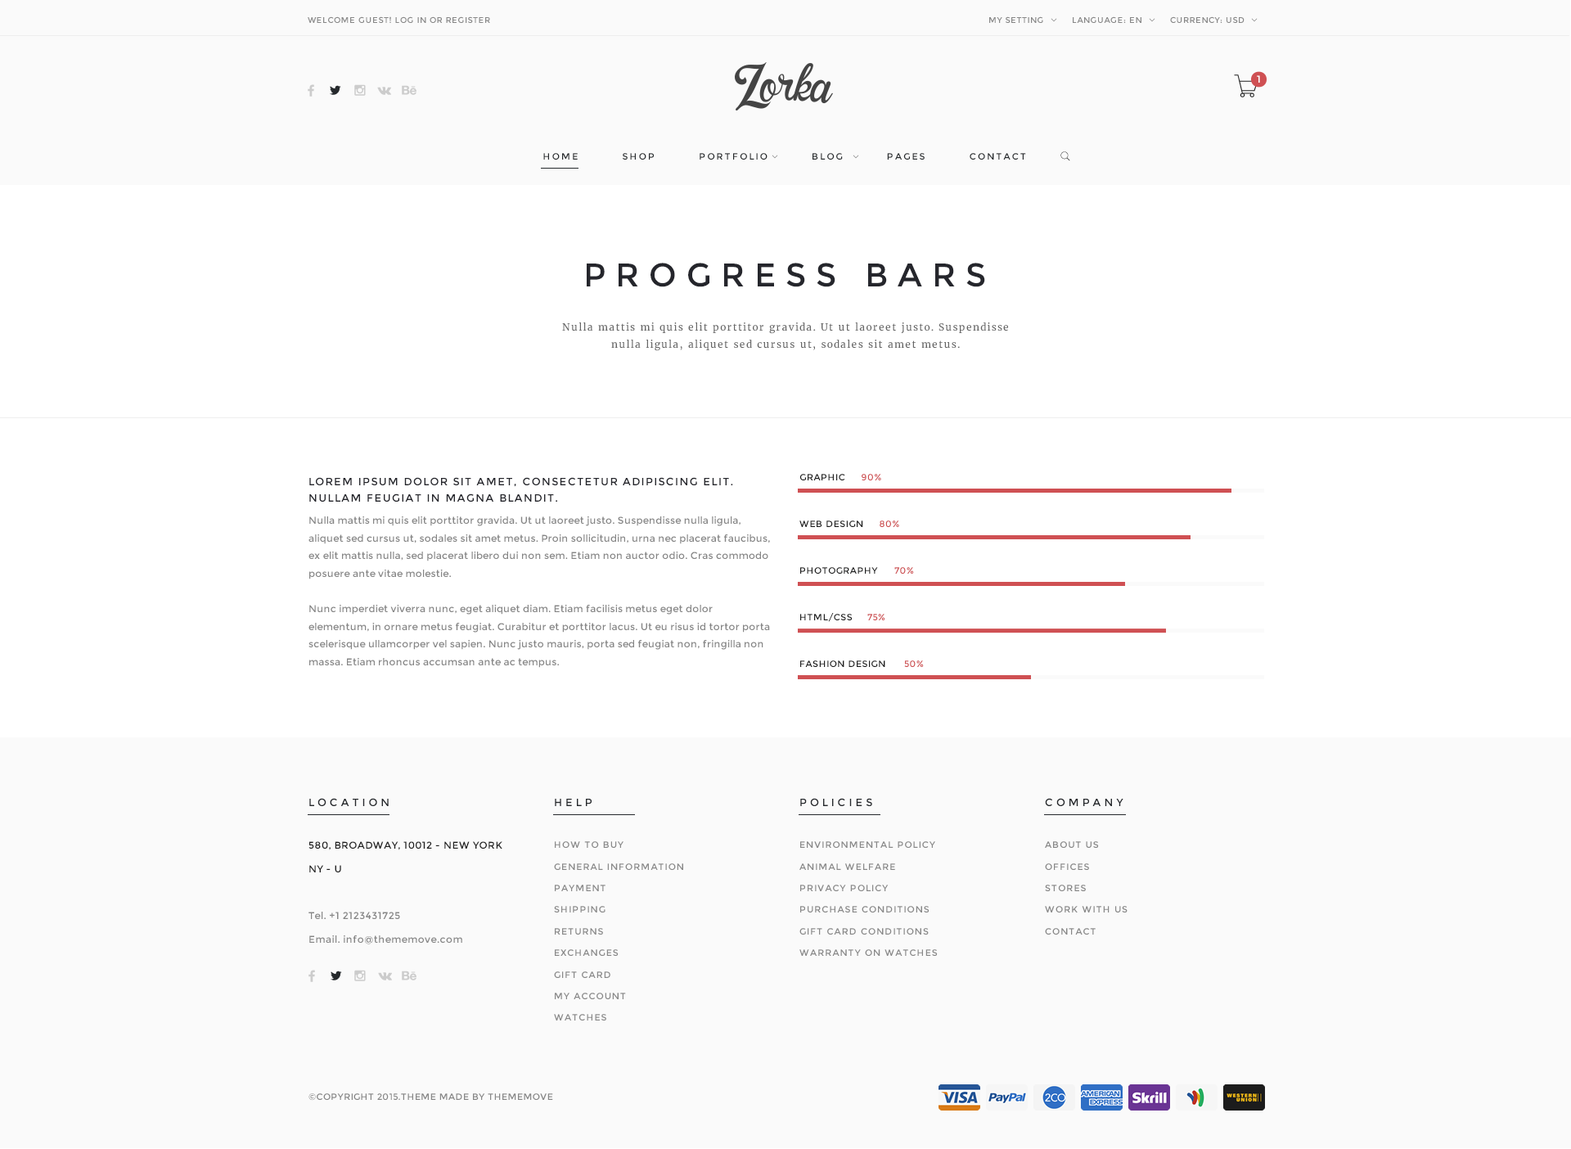
<style>
.page{position:relative;width:1571px;height:1149px;background:#fafafa}
.page>*{position:absolute;margin:0}
.t1{font:8.2px "Montserrat-Regular";letter-spacing:0.05em;color:#888888}
.t2{font:9.8px "Montserrat-Regular";letter-spacing:0.3em;color:#ffffff}
.t3{font:9px "Montserrat-Regular";letter-spacing:0.2em;color:#25292c}
.t4{font:32.7px "Montserrat-Regular";letter-spacing:0.3em;color:#25262c}
.t5{font:9.8px/17.7px "Merriweather-Regular";letter-spacing:0.1em;color:#666666}
.t6{font:9px "Montserrat-Regular";letter-spacing:0.05em;color:#1f1f1f}
.t7{font:9px "Montserrat-Regular";letter-spacing:0.05em;color:#cf5053}
.t8{font:10.6px/17px "Montserrat-Regular";letter-spacing:0.1em;color:#25262c}
.t9{font:9.8px/17.7px "Montserrat-Regular";letter-spacing:0.02em;color:#868686}
.t10{font:9px "Montserrat-Regular";letter-spacing:0.05em;color:#ce5052}
.t11{font:10.6px "Montserrat-Regular";letter-spacing:0.3em;color:#25282c}
.t12{font:9.8px/23.6px "Montserrat-Regular";letter-spacing:0.04em;color:#868686}
.t13{font:9.8px/23.6px "Montserrat-Regular";letter-spacing:0.04em;color:#202020}
.t14{font:9px/21.6px "Montserrat-Regular";letter-spacing:0.1em;color:#888888}
.t15{font:9px/21.6px "Montserrat-Regular";letter-spacing:0.1em;color:#878787}
.t16{font:9px "Montserrat-Regular";letter-spacing:0.04em;color:#868686}
</style>
<div class="page">
<p class="t1" style="left:308px;top:16px;width:182px;height:7px">WELCOME GUEST! LOG IN OR REGISTER</p>
<p class="t1" style="left:989px;top:16px;width:54px;height:7px">MY SETTING</p>
<p class="t1" style="left:1073px;top:16px;width:68px;height:7px">LANGUAGE: EN</p>
<p class="t1" style="left:1170px;top:16px;width:74px;height:7px">CURRENCY: USD</p>
<p class="t2" style="left:1257px;top:75px;width:3px;height:8px">1</p>
<p class="t3" style="left:543px;top:153px;width:483px;height:7px">HOME          SHOP          PORTFOLIO          BLOG          PAGES          CONTACT</p>
<p class="t4" style="left:587px;top:263px;width:398px;height:24px">PROGRESS BARS</p>
<p class="t5" style="left:562px;top:322px;width:446px;height:29px;text-align:center">Nulla mattis mi quis elit porttitor gravida. Ut ut laoreet justo. Suspendisse nulla ligula, aliquet sed cursus ut, sodales sit amet metus.</p>
<p class="t6" style="left:799px;top:474px;width:46px;height:6px">GRAPHIC</p>
<p class="t7" style="left:862px;top:474px;width:19px;height:6px">90%</p>
<p class="t8" style="left:309px;top:477px;width:424px;height:25px">LOREM IPSUM DOLOR SIT AMET, CONSECTETUR ADIPISCING ELIT. NULLAM FEUGIAT IN MAGNA BLANDIT.</p>
<p class="t9" style="left:308px;top:516px;width:462px;height:152px">Nulla mattis mi quis elit porttitor gravida. Ut ut laoreet justo. Suspendisse nulla ligula, aliquet sed cursus ut, sodales sit amet metus. Proin sollicitudin, urna nec placerat faucibus, ex elit mattis nulla, sed placerat libero dui non sem. Etiam non auctor odio. Cras commodo posuere ante vitae molestie. <br><br>Nunc imperdiet viverra nunc, eget aliquet diam. Etiam facilisis metus eget dolor elementum, in ornare metus feugiat. Curabitur et porttitor lacus. Ut eu risus id tortor porta scelerisque ullamcorper vel sapien. Nunc justo mauris, porta sed feugiat non, fringilla non massa. Etiam rhoncus accumsan ante ac tempus.</p>
<p class="t6" style="left:799px;top:520px;width:64px;height:7px">WEB DESIGN</p>
<p class="t10" style="left:880px;top:520px;width:19px;height:7px">80%</p>
<p class="t6" style="left:800px;top:567px;width:78px;height:7px">PHOTOGRAPHY</p>
<p class="t10" style="left:894px;top:567px;width:20px;height:7px">70%</p>
<p class="t6" style="left:800px;top:613px;width:53px;height:9px">HTML/CSS</p>
<p class="t10" style="left:867px;top:614px;width:18px;height:6px">75%</p>
<p class="t6" style="left:800px;top:660px;width:85px;height:7px">FASHION DESIGN</p>
<p class="t10" style="left:904px;top:660px;width:20px;height:7px">50%</p>
<p class="t11" style="left:309px;top:798px;width:80px;height:8px">LOCATION</p>
<p class="t11" style="left:800px;top:798px;width:72px;height:8px">POLICIES</p>
<p class="t11" style="left:1045px;top:798px;width:78px;height:8px">COMPANY</p>
<p class="t11" style="left:555px;top:799px;width:37px;height:7px">HELP</p>
<p class="t12" style="left:308px;top:841px;width:194px;height:103px"><span class="t13">580, BROADWAY, 10012 - NEW YORK <br>NY - U<br><br></span>Tel. +1 2123431725<br>Email. info@thememove.com</p>
<p class="t14" style="left:554px;top:841px;width:129px;height:179px">HOW TO BUY<br>GENERAL INFORMATION<br>PAYMENT<br>SHIPPING<br>RETURNS<br>EXCHANGES<br>GIFT CARD<br>MY ACCOUNT<br>WATCHES</p>
<p class="t14" style="left:799px;top:841px;width:139px;height:115px">ENVIRONMENTAL POLICY<br>ANIMAL WELFARE<br>PRIVACY POLICY<br>PURCHASE CONDITIONS<br>GIFT CARD CONDITIONS<br>WARRANTY ON WATCHES</p>
<p class="t15" style="left:1045px;top:841px;width:82px;height:93px">ABOUT US<br>OFFICES<br>STORES<br>WORK WITH US<br>CONTACT</p>
<p class="t16" style="left:308px;top:1093px;width:245px;height:7px">©COPYRIGHT 2015.THEME MADE BY THEMEMOVE</p>
</div>
